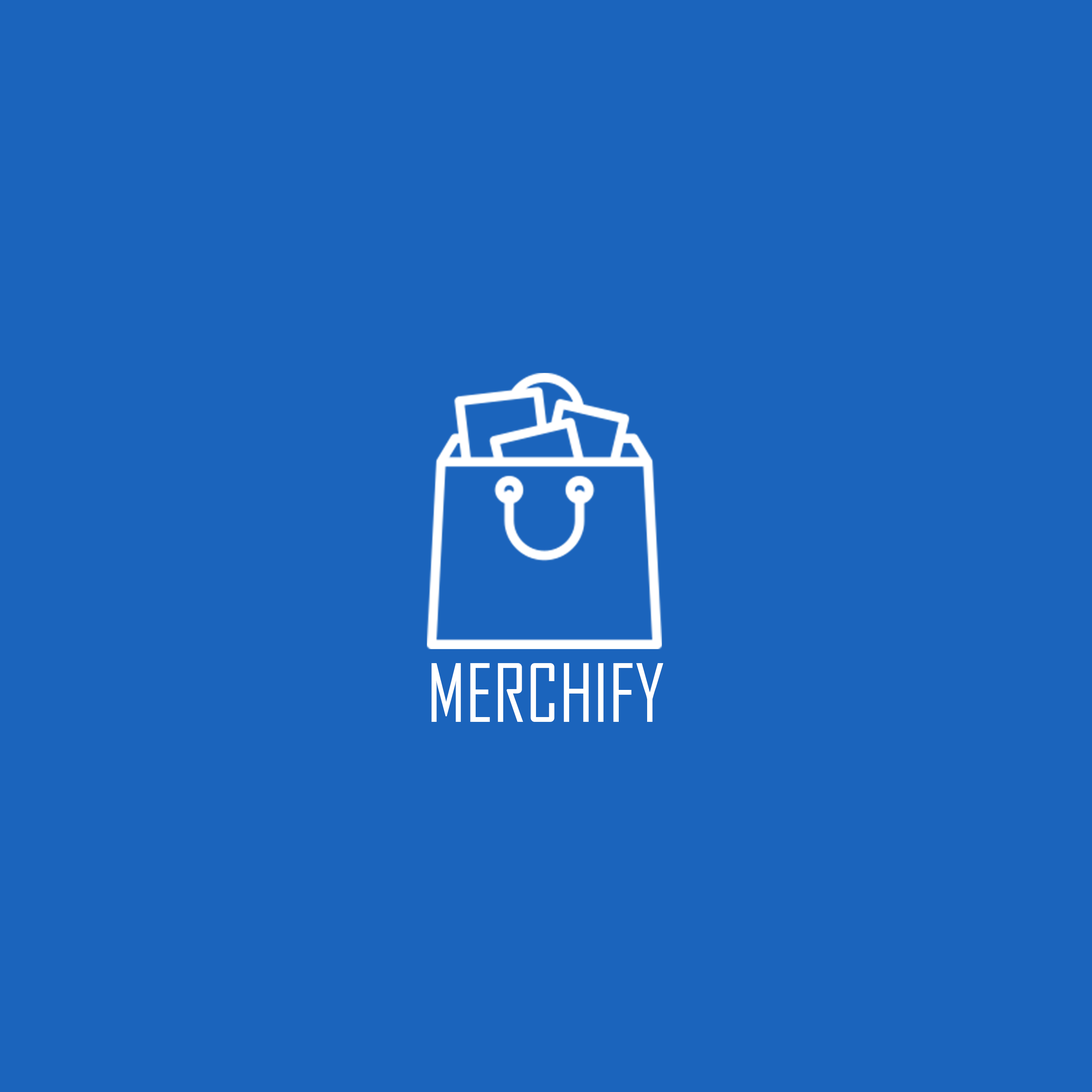
<style>
.page{position:relative;width:1092px;height:1092px;background:#1b64bc}
.page>*{position:absolute;margin:0}
.t1{font:77.3px "AgencyFB-Reg";color:#ffffff}
</style>
<div class="page">
<p class="t1" style="left:431px;top:663px;width:233px;height:59px">MERCHIFY</p>
</div>
